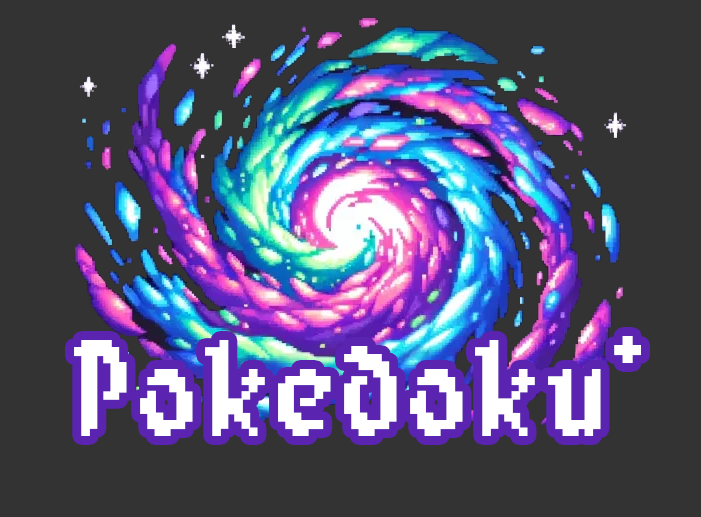
<style>
.page{position:relative;width:701px;height:517px;background:#333333}
.page>*{position:absolute;margin:0}
.t1{font:111px "8-bitLimit(BRK)";letter-spacing:0.1em;color:#ffffff}
.t2{font:222px "8-bitLimit(BRK)";letter-spacing:0.1em;color:#ffffff}
</style>
<div class="page">
<p class="t1" style="left:74px;top:336px;width:567px;height:100px">Pokedoku<span class="t2">.</span></p>
</div>
